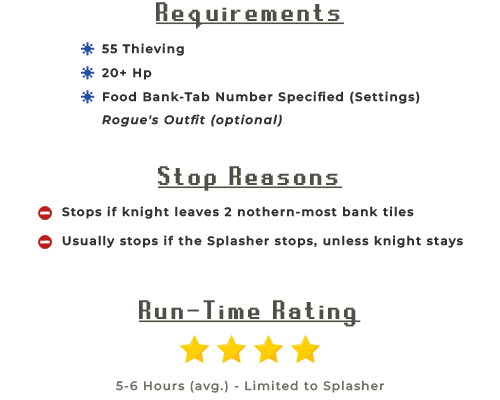
<style>
.page{position:relative;width:500px;height:400px;background:#ffffff}
.page>*{position:absolute;margin:0}
.t1{font:30px "RuneScape-UF";letter-spacing:0.1em;color:#504f46;text-decoration:underline}
.t2{font:30px "RuneScape-UF";letter-spacing:0.1em;color:#21509e}
.t3{font:12px "MontserratRoman-SemiBold";letter-spacing:0.1em;color:#313131}
.t4{font:12px "MontserratItalic-SemiBoldItalic";letter-spacing:0.1em;color:#313131}
.t5{font:12px "MontserratRoman-Medium";letter-spacing:0.1em;color:#717067}
</style>
<div class="page">
<p class="t1" style="left:156px;top:2px;width:188px;height:27px">Requirements</p>
<p class="t2" style="left:81px;top:42px;width:14px;height:14px">*</p>
<p class="t3" style="left:102px;top:43px;width:82px;height:13px">55 Thieving</p>
<p class="t2" style="left:81px;top:66px;width:14px;height:14px">*</p>
<p class="t3" style="left:102px;top:68px;width:50px;height:12px">20+ Hp</p>
<p class="t2" style="left:81px;top:90px;width:14px;height:14px">*</p>
<p class="t3" style="left:103px;top:91px;width:317px;height:13px">Food Bank-Tab Number Specified (Settings)</p>
<p class="t4" style="left:102px;top:114px;width:180px;height:13px">Rogue's Outfit (optional)</p>
<p class="t1" style="left:158px;top:166px;width:185px;height:25px">Stop Reasons</p>
<p class="t3" style="left:62px;top:206px;width:352px;height:13px">Stops if knight leaves 2 nothern-most bank tiles</p>
<p class="t3" style="left:62px;top:235px;width:401px;height:13px">Usually stops if the Splasher stops, unless knight stays</p>
<p class="t1" style="left:139px;top:300px;width:222px;height:27px">Run-Time Rating</p>
<p class="t5" style="left:116px;top:380px;width:268px;height:13px">5-6 Hours (avg.) - Limited to Splasher</p>
</div>
